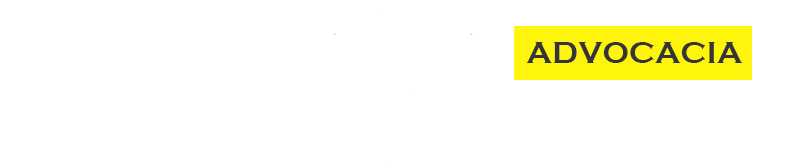
<style>
.page{position:relative;width:793px;height:168px;background:#ffffff}
.page>*{position:absolute;margin:0}
.t1{font:31.2px "CopperplateGothic-Bold";color:#353535}
</style>
<div class="page">
<p class="t1" style="left:526px;top:42px;width:217px;height:21px">ADVOCACIA</p>
</div>
